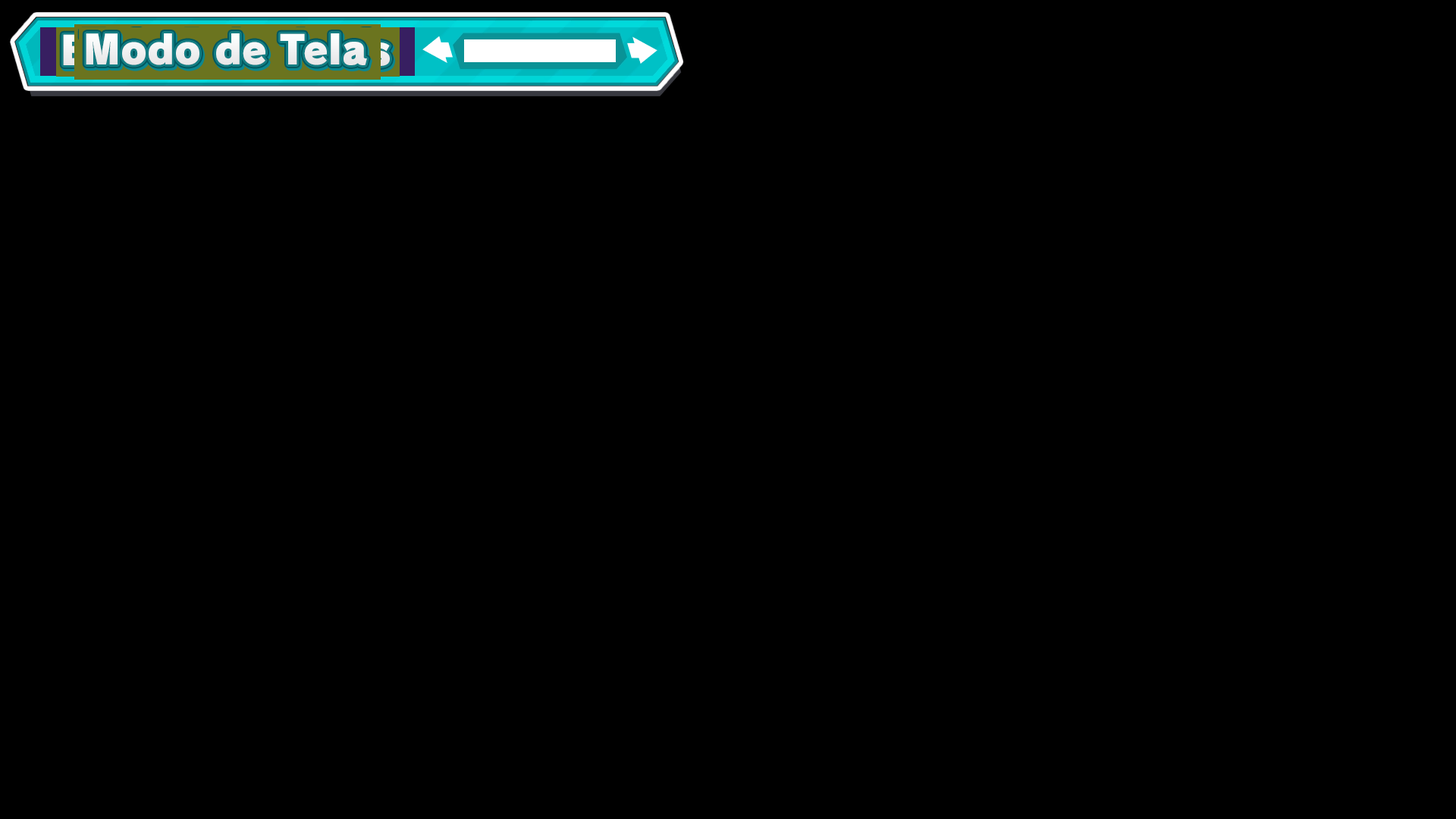
<style>
.page{position:relative;width:1456px;height:819px;background:#000000}
.page>*{position:absolute;margin:0}
.t1{font:39.4px "RodinPro-UB";letter-spacing:-0.04em}
.t2{font:39.4px "RodinPro-UB";letter-spacing:-0.004em;color:#f0f0f1}
</style>
<div class="page">
<p class="t1" style="left:63px;top:33px;width:327px;height:33px">Efeitos de Notas</p>
<p class="t2" style="left:86px;top:33px;width:281px;height:32px">Modo de Tela</p>
</div>
